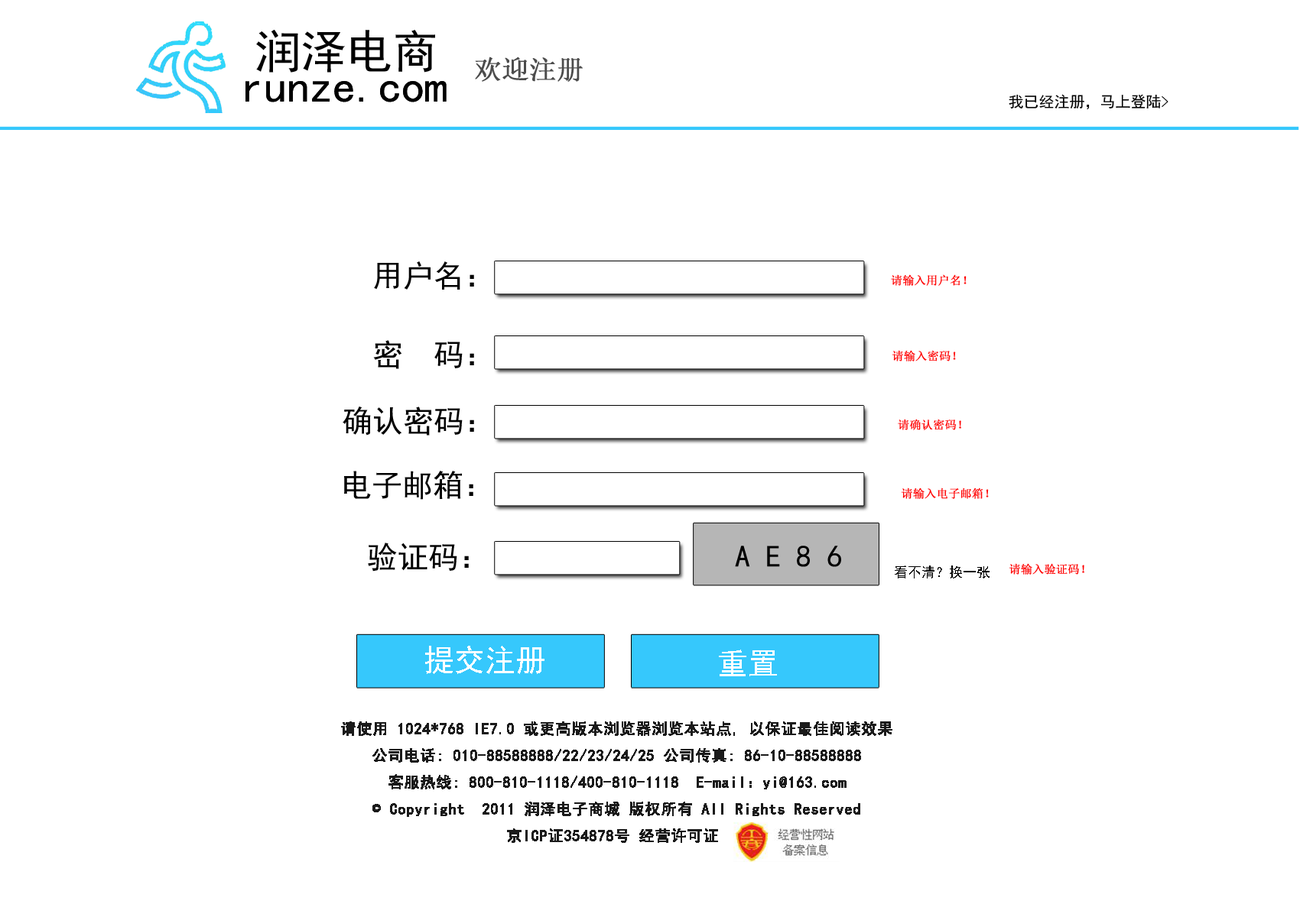
<style>
.page{position:relative;width:1300px;height:917px;background:#ffffff}
.page>*{position:absolute;margin:0}
.t1{font:45.9px "SimHei";color:#010101}
.t2{font:26.8px "SimSun";color:#4c4c4c;font-weight:bold}
.t3{font:15.3px "SimHei";color:#000000}
.t4{font:30.6px "SimHei";color:#000000}
.t5{font:11.5px "SimSun";color:#ff0000;font-weight:bold}
.t6{font:13.8px "SimHei";color:#000000}
.t7{font:30.6px "SimHei";color:#ffffff}
.t8{font:15.3px "SimHei";color:#1a1a1a;font-weight:bold}
.t9{font:15.3px "SimSun";color:#1a1a1a;font-weight:bold}
</style>
<div class="page">
<p class="t1" style="left:256px;top:30px;width:179px;height:43px">润泽电商</p>
<p class="t2" style="left:475px;top:57px;width:108px;height:25px">欢迎注册</p>
<p class="t1" style="left:245px;top:81px;width:201px;height:21px">runze.com</p>
<p class="t1" style="left:245px;top:81px;width:201px;height:21px">runze.com</p>
<p class="t3" style="left:1008px;top:94px;width:160px;height:15px">我已经注册，马上登陆&gt;</p>
<p class="t4" style="left:374px;top:261px;width:100px;height:29px">用户名：</p>
<p class="t5" style="left:891px;top:274px;width:75px;height:12px">请输入用户名！</p>
<p class="t4" style="left:373px;top:340px;width:101px;height:29px">密  码：</p>
<p class="t5" style="left:891px;top:350px;width:65px;height:12px">请输入密码！</p>
<p class="t4" style="left:343px;top:407px;width:131px;height:29px">确认密码：</p>
<p class="t5" style="left:898px;top:419px;width:63px;height:11px">请确认密码！</p>
<p class="t4" style="left:344px;top:471px;width:129px;height:29px">电子邮箱：</p>
<p class="t5" style="left:901px;top:488px;width:88px;height:11px">请输入电子邮箱！</p>
<p class="t4" style="left:368px;top:543px;width:101px;height:29px">验证码：</p>
<p class="t4" style="left:735px;top:546px;width:106px;height:21px">A E 8 6</p>
<p class="t6" style="left:895px;top:566px;width:94px;height:13px">看不清？换一张</p>
<p class="t5" style="left:1008px;top:563px;width:76px;height:12px">请输入验证码！</p>
<p class="t7" style="left:425px;top:646px;width:119px;height:28px">提交注册</p>
<p class="t7" style="left:719px;top:650px;width:58px;height:27px">重置</p>
<p class="t8" style="left:341px;top:722px;width:551px;height:121px;text-align:center">请使用 1024*768 IE7.0 或更高版本浏览器浏览本站点, 以保证最佳阅读效果<br>公司电话: 010-88588888/22/23/24/25 公司传真: 86-10-88588888<br>客服热线: 800-810-1118/400-810-1118  E-mail：yi@163.com<br><span class="t9">©</span> Copyright  2011 润泽电子商城 版权所有 All Rights Reserved<br>京ICP证354878号 经营许可证</p>
</div>
